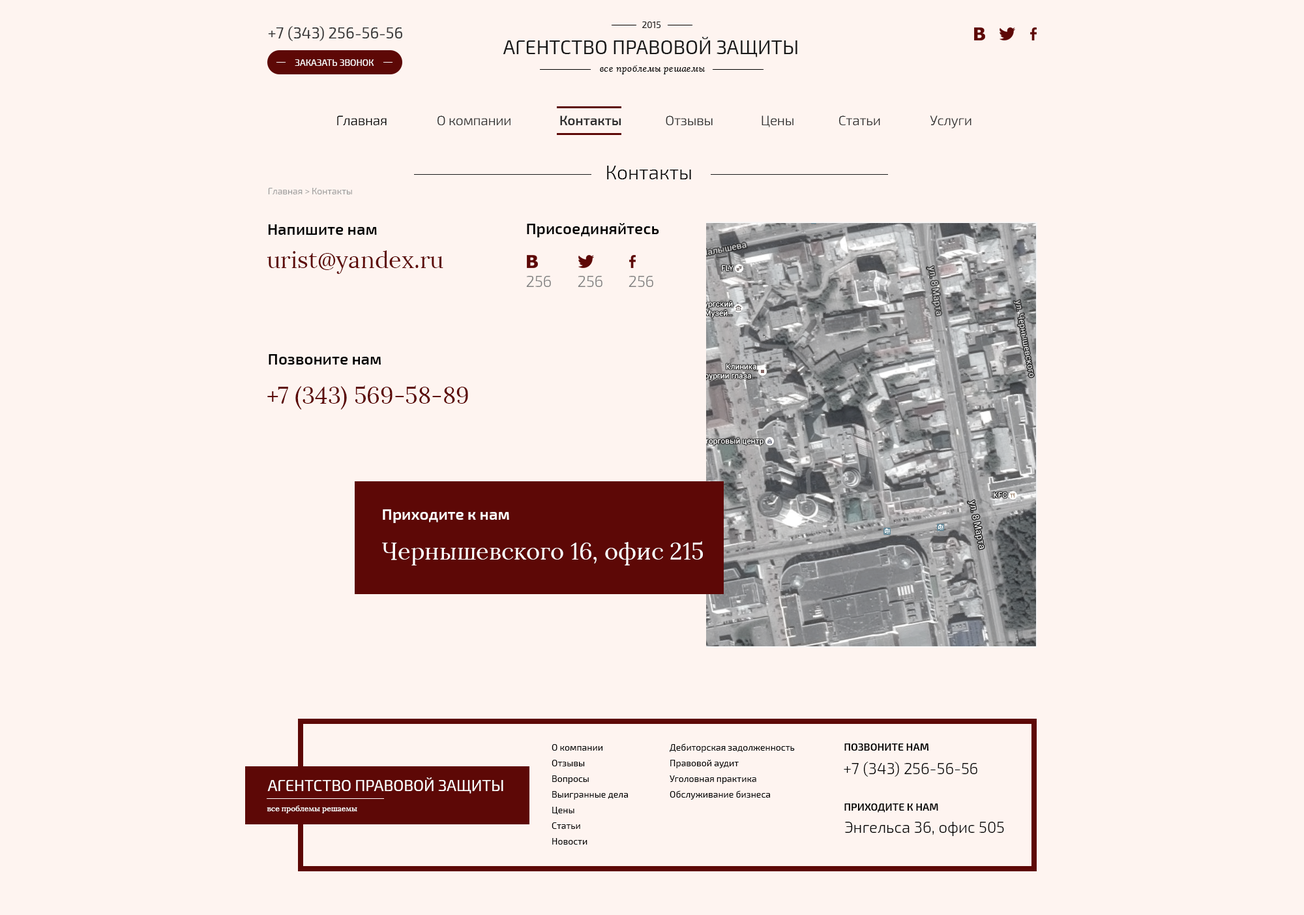
<style>
.page{position:relative;width:1304px;height:915px;background:#fef4f0}
.page>*{position:absolute;margin:0}
.t1{font:15.6px "Exo2-Regular";color:#3a3a3a}
.t2{font:9.1px "Exo2-Regular";color:#1a1a1a;text-transform:uppercase}
.t3{font:19.6px "Exo2-Regular";color:#1a1a1a;text-transform:uppercase}
.t4{font:9.1px "Exo2-Regular";color:#ffffff;text-transform:uppercase}
.t5{font:9.1px "Lora-Italic";color:#000000}
.t6{font:13px "Exo2-Light";color:#000000}
.t7{font:13px "Exo2-Light";color:#2f2f2f}
.t8{font:13px "Exo2-SemiBold";color:#2f2f2f}
.t9{font:19.5px "Exo2-Light";color:#000000}
.t10{font:9.1px "Exo2-Light";color:#979797}
.t11{font:15.6px "Exo2-SemiBold";color:#000000}
.t12{font:23.5px "Lora-Regular";color:#5d0806}
.t13{font:15.6px "Exo2-Light";color:#808080}
.t14{font:15.6px "Exo2-SemiBold";color:#ffffff}
.t15{font:23.5px "Lora-Regular";color:#ffffff}
.t16{font:9.1px/15.6px "Exo2-Regular";color:#000000}
.t17{font:10.4px "Exo2-SemiBold";color:#000000;text-transform:uppercase}
.t18{font:15.6px "Exo2-Light";color:#000000}
.t19{font:15.6px "Exo2-Regular";color:#ffffff;text-transform:uppercase}
.t20{font:7.8px "Lora-Regular";color:#ffffff}
</style>
<div class="page">
<p class="t1" style="left:268px;top:26px;width:134px;height:15px">+7 (343) 256-56-56</p>
<p class="t2" style="left:642px;top:22px;width:19px;height:6px">2015</p>
<p class="t3" style="left:503px;top:37px;width:294px;height:20px">Агентство правовой защиты</p>
<p class="t4" style="left:295px;top:59px;width:79px;height:7px">Заказать звонок</p>
<p class="t5" style="left:600px;top:65px;width:105px;height:9px">все проблемы решаемы</p>
<p class="t6" style="left:337px;top:115px;width:50px;height:10px">Главная</p>
<p class="t7" style="left:437px;top:115px;width:73px;height:10px">О компании</p>
<p class="t8" style="left:560px;top:115px;width:61px;height:10px">Контакты</p>
<p class="t7" style="left:666px;top:115px;width:47px;height:10px">Отзывы</p>
<p class="t7" style="left:761px;top:115px;width:32px;height:12px">Цены</p>
<p class="t7" style="left:839px;top:115px;width:41px;height:10px">Статьи</p>
<p class="t7" style="left:930px;top:115px;width:41px;height:13px">Услуги</p>
<p class="t9" style="left:607px;top:166px;width:84px;height:13px">Контакты</p>
<p class="t10" style="left:268px;top:188px;width:84px;height:6px">Главная &gt; Контакты</p>
<p class="t11" style="left:268px;top:224px;width:109px;height:11px">Напишите нам</p>
<p class="t11" style="left:527px;top:223px;width:132px;height:14px">Присоединяйтесь</p>
<p class="t12" style="left:267px;top:250px;width:176px;height:24px">urist@yandex.ru</p>
<p class="t13" style="left:526px;top:276px;width:25px;height:11px">256</p>
<p class="t13" style="left:578px;top:276px;width:24px;height:11px">256</p>
<p class="t13" style="left:628px;top:276px;width:25px;height:11px">256</p>
<p class="t11" style="left:269px;top:354px;width:112px;height:10px">Позвоните нам</p>
<p class="t12" style="left:267px;top:385px;width:201px;height:24px">+7 (343) 569-58-89</p>
<p class="t14" style="left:383px;top:509px;width:126px;height:14px">Приходите к нам</p>
<p class="t15" style="left:382px;top:541px;width:321px;height:24px">Чернышевского 16, офис 215</p>
<p class="t16" style="left:551px;top:744px;width:77px;height:100px">О компании<br>Отзывы<br>Вопросы<br>Выигранные дела<br>Цены<br>Статьи<br>Новости</p>
<p class="t16" style="left:669px;top:743px;width:126px;height:56px">Дебиторская задолженность<br>Правовой аудит<br>Уголовная практика<br>Обслуживание бизнеса</p>
<p class="t17" style="left:844px;top:743px;width:85px;height:7px">Позвоните нам</p>
<p class="t18" style="left:844px;top:761px;width:133px;height:15px">+7 (343) 256-56-56</p>
<p class="t19" style="left:267px;top:777px;width:236px;height:16px">Агентство правовой защиты</p>
<p class="t20" style="left:267px;top:805px;width:90px;height:8px">все проблемы решаемы</p>
<p class="t17" style="left:844px;top:803px;width:94px;height:9px">приходите к нам</p>
<p class="t18" style="left:845px;top:821px;width:159px;height:15px">Энгельса 36, офис 505</p>
</div>
